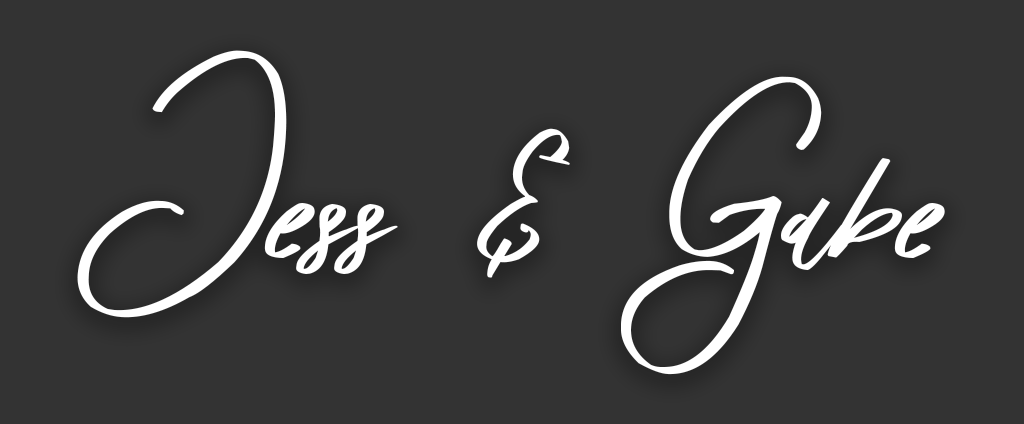
<style>
.page{position:relative;width:1024px;height:424px;background:#333333}
.page>*{position:absolute;margin:0}
.t1{font:300px "Kensington1-Italic";color:#ffffff}
</style>
<div class="page">
<p class="t1" style="left:77px;top:50px;width:868px;height:325px">Jess &amp; Gabe</p>
</div>
